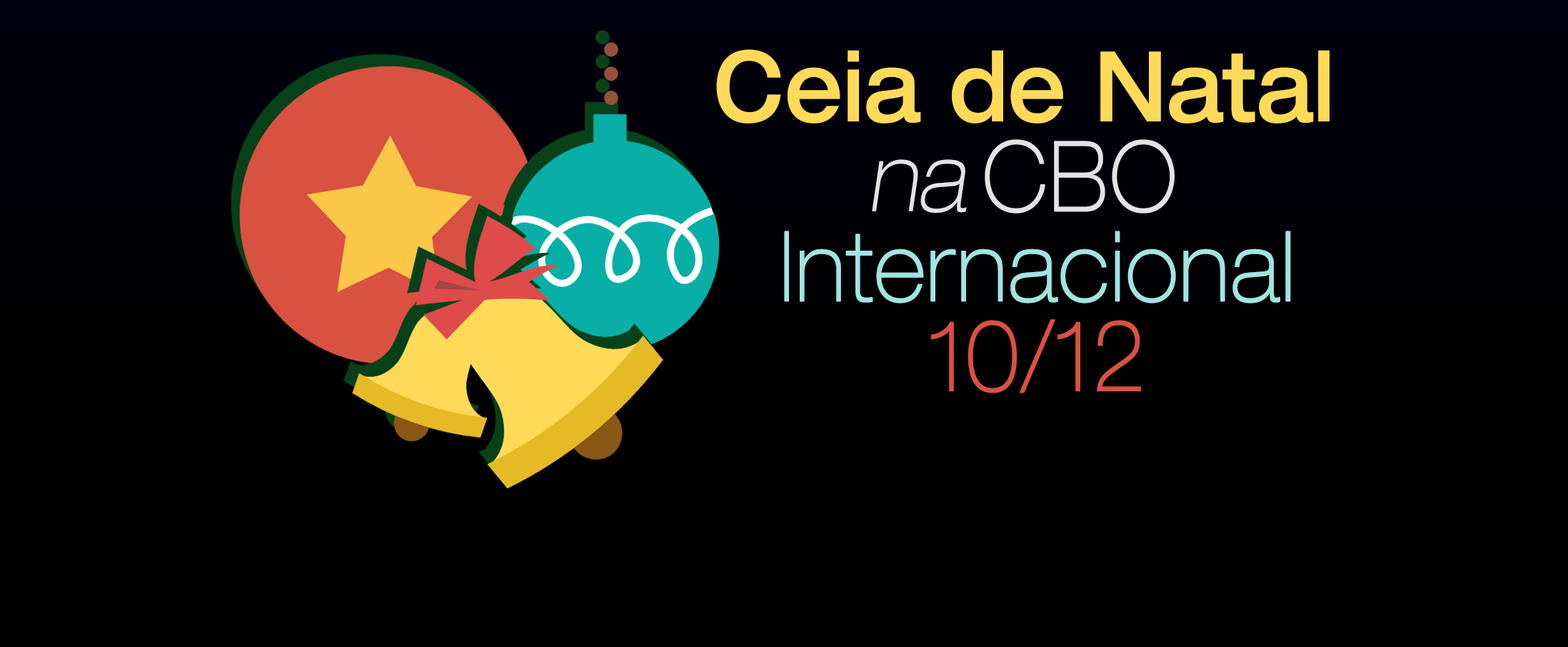
<style>
.page{position:relative;width:1568px;height:647px;background:#000001}
.page>*{position:absolute;margin:0}
.t1{font:97.4px "Helvetica63-ExtendedMedium";color:#ffda58;scale:0.83 1}
.t2{font:97.4px "Helvetica33-ExtendedThin";color:#e3e3e3;font-style:italic;scale:0.83 1}
.t3{font:97.4px "Helvetica33-ExtendedThin";color:#e3e3e3;font-weight:bold;scale:0.83 1}
.t4{font:97.4px "Helvetica33-ExtendedThin";color:#a1e4e0;font-weight:bold;scale:0.83 1}
.t5{font:97.4px "Helvetica33-ExtendedThin";color:#d95141;font-weight:bold;scale:0.83 1}
</style>
<div class="page">
<p class="t1" style="left:716px;top:49px;width:614px;height:344px;text-align:center">Ceia de Natal <br><span class="t2">na </span><span class="t3">CBO <br></span><span class="t4">Internacional<br></span><span class="t5">10/12</span></p>
</div>
